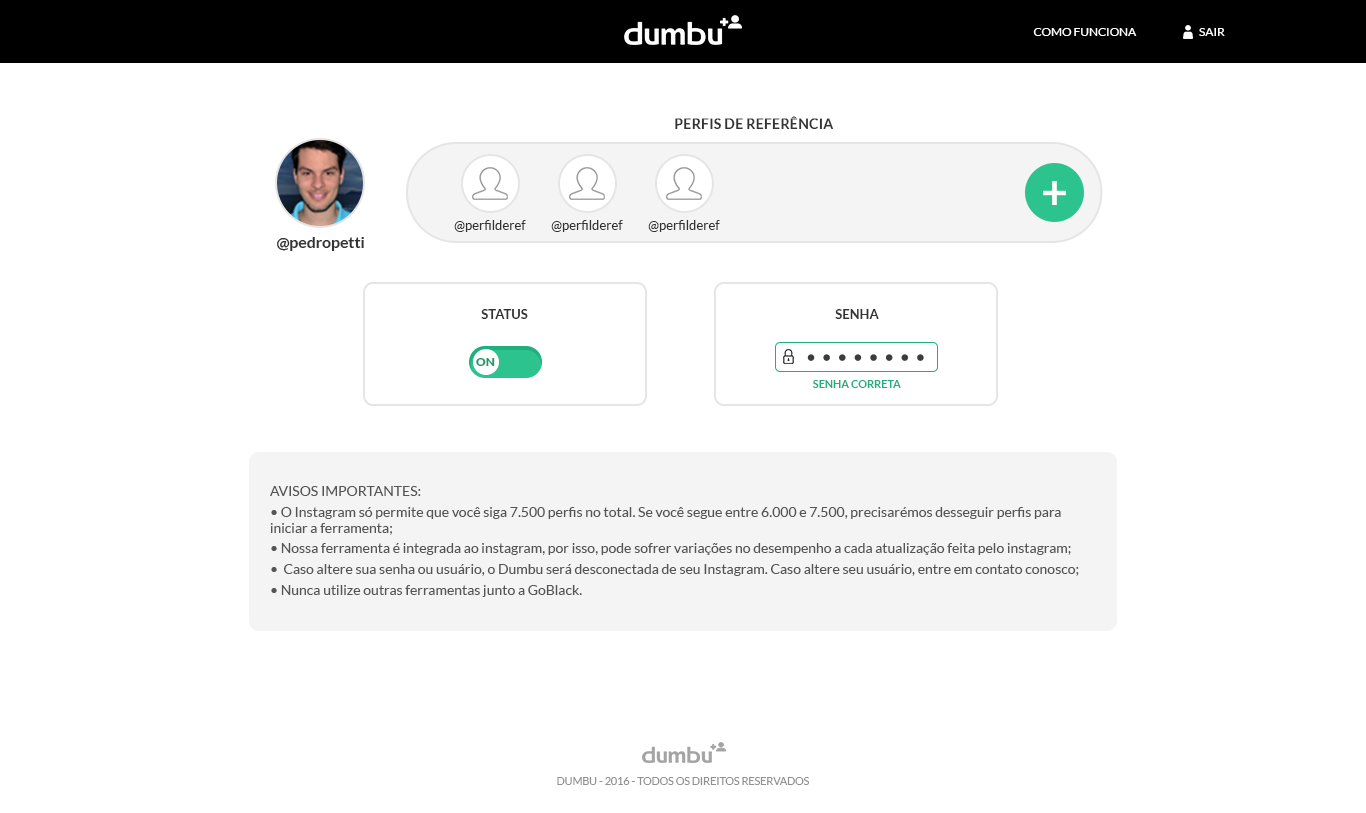
<style>
.page{position:relative;width:1366px;height:813px;background:#ffffff}
.page>*{position:absolute;margin:0}
.t1{font:12px "Lato-Regular";color:#ffffff;text-transform:uppercase}
.t2{font:12px "Lato-Regular";color:#ffffff}
.t3{font:14.5px "Lato-Bold";color:#333333;text-transform:uppercase}
.t4{font:13.1px "Lato-Regular";color:#333333}
.t5{font:15.8px "Lato-Bold";color:#333333}
.t6{font:13.1px "Lato-Bold";color:#333333;text-transform:uppercase}
.t7{font:12px "Lato-Black";letter-spacing:0.02em;color:#1b996e;text-transform:uppercase}
.t8{font:10.9px "Lato-Bold";color:#1eaf7d;text-transform:uppercase}
.t9{font:14px/20.6px "Lato-Regular";color:#555555}
.t10{font:14px/16px "Lato-Regular";color:#555555}
.t11{font:14px/11.3px "Lato-Regular";color:#555555}
.t12{font:10.6px "Lato-Regular";color:#919191;text-transform:uppercase}
</style>
<div class="page">
<p class="t1" style="left:1033px;top:28px;width:104px;height:8px">como funciona</p>
<p class="t2" style="left:1199px;top:28px;width:26px;height:8px">SAIR</p>
<p class="t3" style="left:675px;top:116px;width:159px;height:13px">Perfis de Referência</p>
<p class="t4" style="left:454px;top:220px;width:72px;height:12px">@perfilderef</p>
<p class="t4" style="left:551px;top:220px;width:72px;height:12px">@perfilderef</p>
<p class="t4" style="left:648px;top:220px;width:72px;height:12px">@perfilderef</p>
<p class="t5" style="left:277px;top:237px;width:87px;height:14px">@pedropetti</p>
<p class="t6" style="left:481px;top:309px;width:47px;height:10px">Status</p>
<p class="t6" style="left:835px;top:309px;width:44px;height:10px">senha</p>
<p class="t7" style="left:476px;top:358px;width:19px;height:8px">on</p>
<p class="t8" style="left:813px;top:380px;width:88px;height:8px">Senha correta</p>
<p class="t9" style="left:270px;top:486px;width:809px;height:111px">AVISOS IMPORTANTES:<br>• O Instagram só permite que você siga 7.500 perfis no total. Se você segue entre 6.000 e 7.500, precisarémos desseguir perfis para <span class="t10">iniciar a ferramenta;<br></span>• Nossa ferramenta é integrada ao instagram, por isso, pode sofrer variações no desempenho a cada atualização feita pelo instagram;<br><span class="t11">•</span>  Caso altere sua senha ou usuário, o Dumbu será desconectada de seu Instagram. Caso altere seu usuário, entre em contato conosco;<br>• Nunca utilize outras ferramentas junto a GoBlack.</p>
<p class="t12" style="left:557px;top:777px;width:252px;height:8px">dUMBU - 2016 - TODOS OS DIREITOS RESERVADOS</p>
</div>
